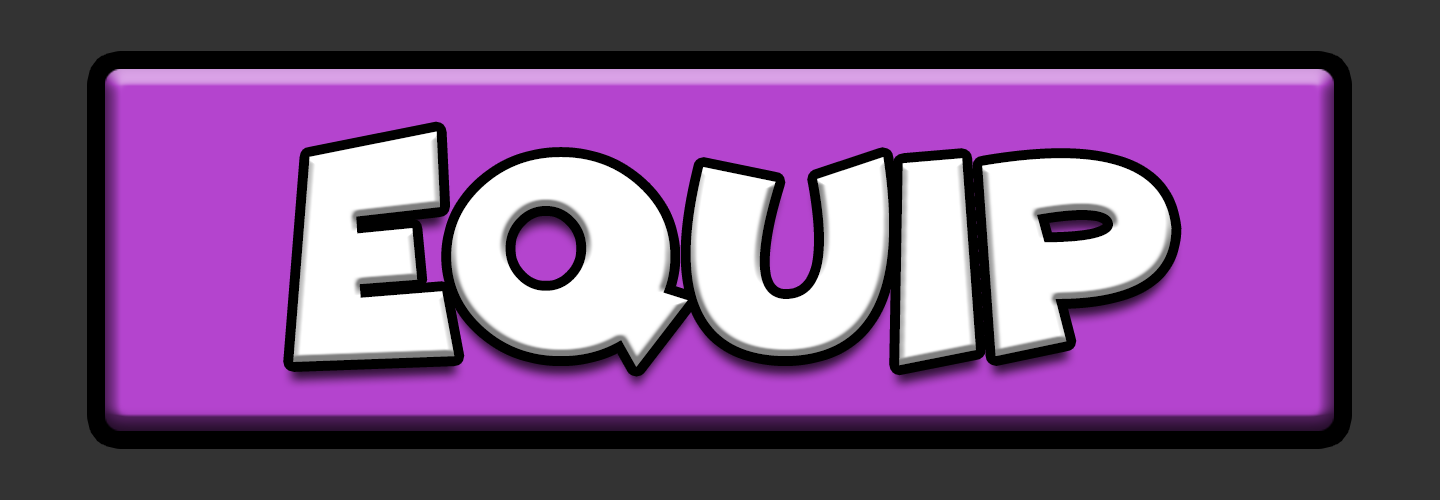
<style>
.page{position:relative;width:1440px;height:500px;background:#333333}
.page>*{position:absolute;margin:0}
.t1{font:290.6px "Funhouse";color:#ffffff;scale:0.95 1}
</style>
<div class="page">
<p class="t1" style="left:293px;top:131px;width:879px;height:236px">EQUIP</p>
</div>
